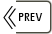
<style>
.page{position:relative;width:52px;height:34px;background:#ffffff}
.page>*{position:absolute;margin:0}
.t1{font:12px "LigurinoCondensed";letter-spacing:0.05em;color:#000000}
</style>
<div class="page">
<p class="t1" style="left:19px;top:13px;width:24px;height:8px">PREV</p>
</div>
